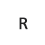
<style>
.page{position:relative;width:45px;height:45px;background:#ffffff}
.page>*{position:absolute;margin:0}
.t1{font:18px "Calibri";color:#252525;font-weight:bold}
</style>
<div class="page">
<p class="t1" style="left:19px;top:17px;width:9px;height:13px">R</p>
</div>
